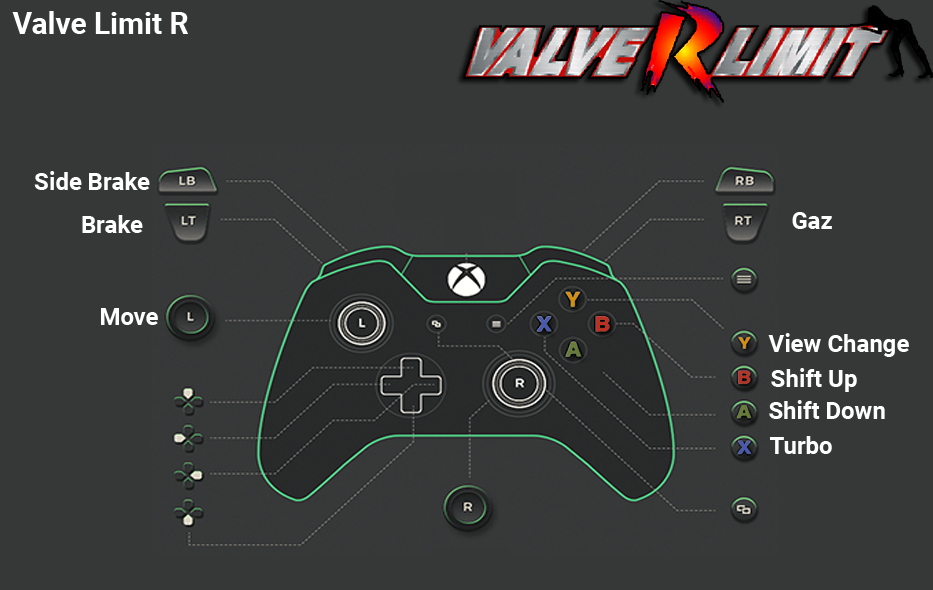
<style>
.page{position:relative;width:933px;height:590px;background:#363838}
.page>*{position:absolute;margin:0}
.t1{font:30px "Roboto-Bold";color:#ffffff}
.t2{font:24px "Roboto-Bold";color:#ffffff}
</style>
<div class="page">
<p class="t1" style="left:12px;top:11px;width:176px;height:23px">Valve Limit R</p>
<p class="t2" style="left:34px;top:171px;width:116px;height:19px">Side Brake</p>
<p class="t2" style="left:82px;top:215px;width:61px;height:18px">Brake</p>
<p class="t2" style="left:792px;top:212px;width:40px;height:17px">Gaz</p>
<p class="t2" style="left:101px;top:308px;width:57px;height:17px">Move</p>
<p class="t2" style="left:768px;top:333px;width:141px;height:24px">View Change</p>
<p class="t2" style="left:771px;top:368px;width:86px;height:24px">Shift Up</p>
<p class="t2" style="left:769px;top:400px;width:116px;height:19px">Shift Down</p>
<p class="t2" style="left:770px;top:436px;width:62px;height:18px">Turbo</p>
</div>
